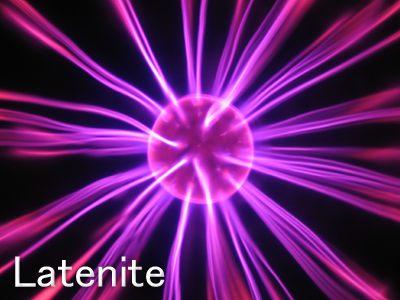
<style>
.page{position:relative;width:400px;height:300px}
.page>*{position:absolute;margin:0}
.t1{font:45px "MS-UIGothic";color:#ffffff}
</style>
<div class="page">
<p class="t1" style="left:15px;top:256px;width:150px;height:31px">Latenite</p>
</div>
